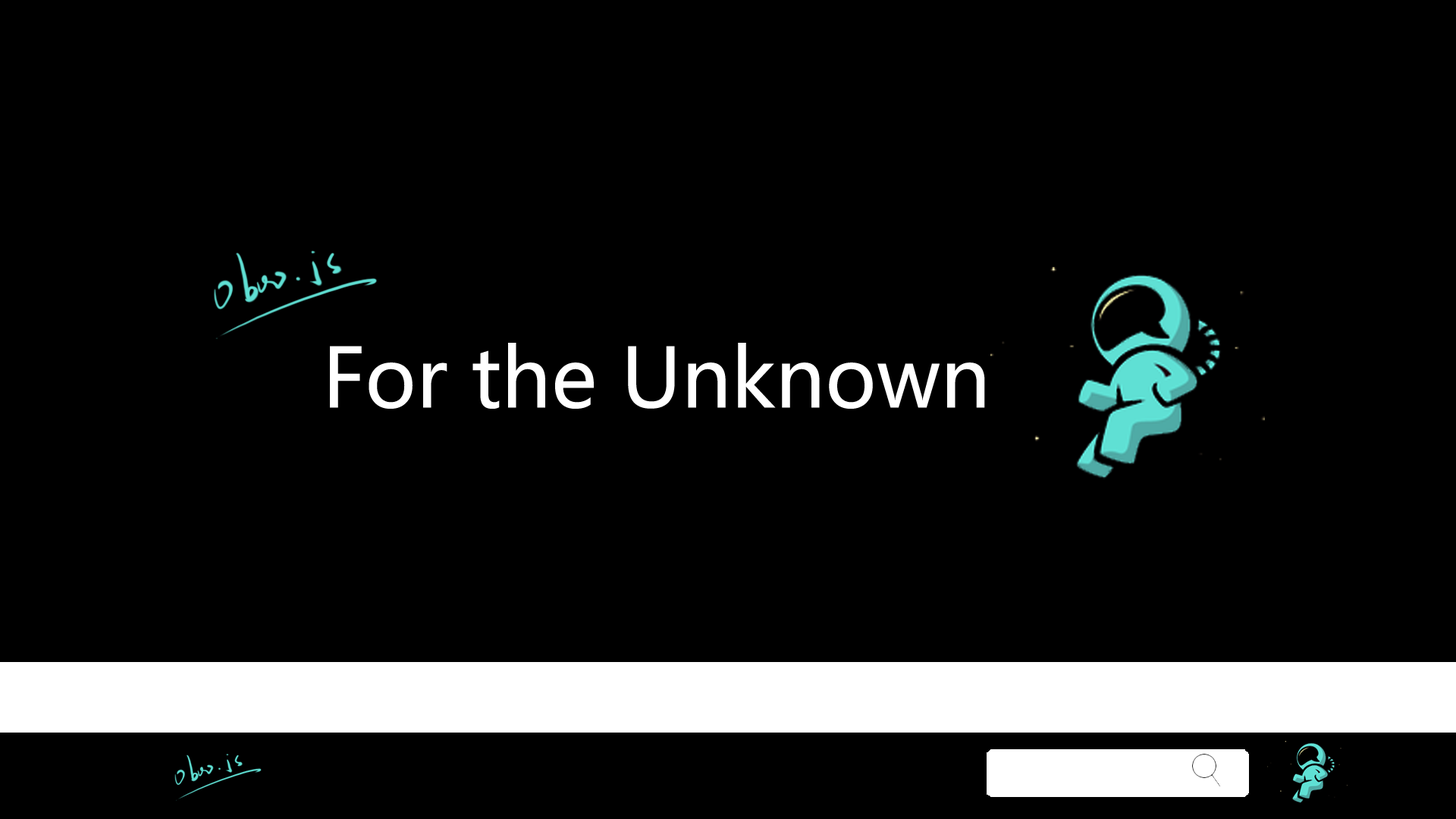
<style>
.page{position:relative;width:1456px;height:819px;background:#000000}
.page>*{position:absolute;margin:0}
.t1{font:80.9px "MicrosoftYaHei";color:#ffffff}
</style>
<div class="page">
<p class="t1" style="left:330px;top:343px;width:655px;height:66px">For the Unknown</p>
</div>
